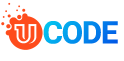
<style>
.page{position:relative;width:124px;height:61px;background:#ffffff}
.page>*{position:absolute;margin:0}
.t1{font:31px "Roboto-Bold";letter-spacing:-0.04em}
</style>
<div class="page">
<p class="t1" style="left:43px;top:21px;width:75px;height:23px">CODE</p>
</div>
